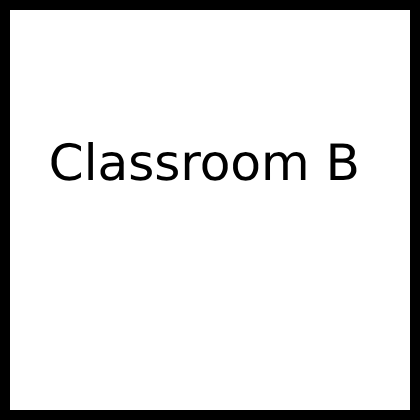
<style>
.page{position:relative;width:420px;height:420px;background:#ffffff}
.page>*{position:absolute;margin:0}
.t1{font:50px "DejaVuSans";color:#000000}
</style>
<div class="page">
<p class="t1" style="left:51px;top:142px;width:306px;height:39px">Classroom B</p>
</div>
